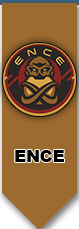
<style>
.page{position:relative;width:79px;height:229px;background:#9d6a2f}
.page>*{position:absolute;margin:0}
.t1{font:16.7px "Arial-Black";letter-spacing:-0.01em;color:#000000}
</style>
<div class="page">
<p class="t1" style="left:15px;top:150px;width:49px;height:12px">ENCE</p>
</div>
